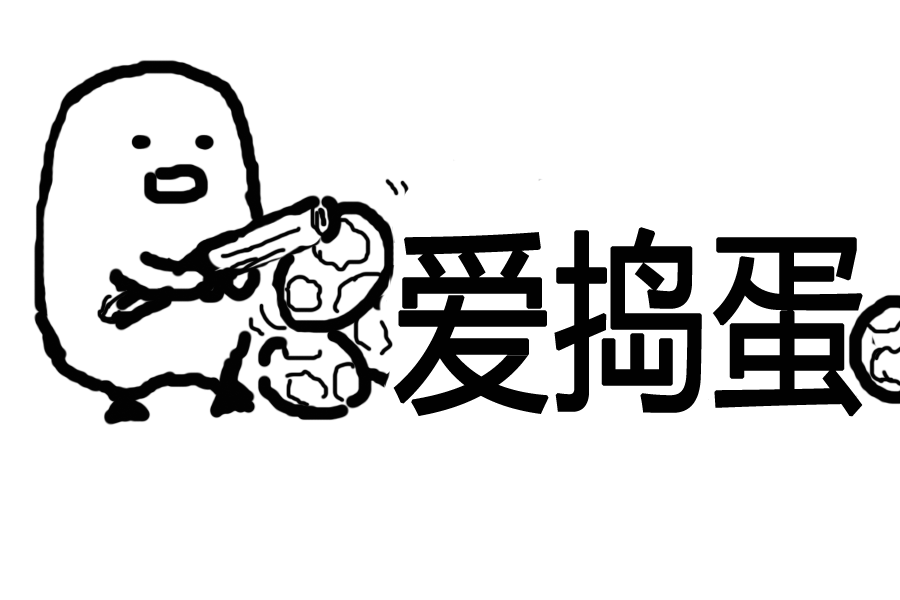
<style>
.page{position:relative;width:900px;height:600px;background:#ffffff}
.page>*{position:absolute;margin:0}
.t1{font:191.1px "MicrosoftYaHei";color:#010101;font-weight:bold;scale:0.8 1}
</style>
<div class="page">
<p class="t1" style="left:393px;top:227px;width:470px;height:190px">爱捣蛋</p>
</div>
